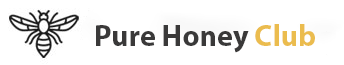
<style>
.page{position:relative;width:344px;height:65px;background:#ffffff}
.page>*{position:absolute;margin:0}
.t1{font:30px "MyriadPro-Bold";color:#3a3939}
.t2{font:30px "MyriadPro-Bold";color:#ebbc4e}
</style>
<div class="page">
<p class="t1" style="left:96px;top:24px;width:219px;height:29px">Pure Honey <span class="t2">Club</span></p>
</div>
